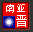
<style>
.page{position:relative;width:33px;height:32px;background:#f20000}
.page>*{position:absolute;margin:0}
.t1{font:10.4px "SimSun";color:#ffffff}
.t2{font:11.7px "SimSun";color:#ffffff}
</style>
<div class="page">
<p class="t1" style="left:6px;top:4px;width:19px;height:9px">南亚</p>
<p class="t2" style="left:16px;top:15px;width:11px;height:12px">晋</p>
</div>
